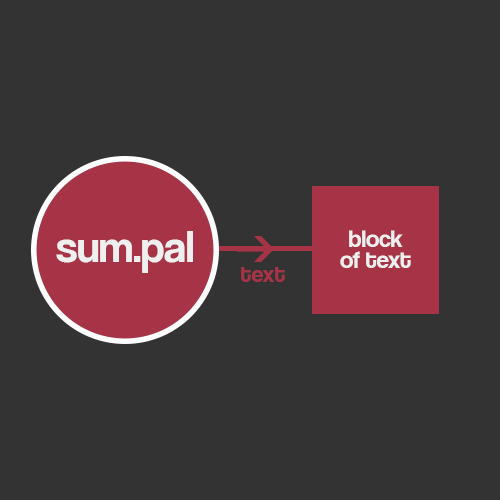
<style>
.page{position:relative;width:500px;height:500px;background:#333333}
.page>*{position:absolute;margin:0}
.t1{font:45.1px "CoolveticaRg-Regular";color:#efefef}
.t2{font:24.5px/20.9px "CoolveticaRg-Regular";color:#efefef}
.t3{font:24.4px "CoolveticaRg-Regular";color:#a63446}
</style>
<div class="page">
<p class="t1" style="left:56px;top:231px;width:137px;height:42px">sum.pal</p>
<p class="t2" style="left:340px;top:230px;width:71px;height:38px;text-align:center">block<br>of text</p>
<p class="t3" style="left:241px;top:267px;width:44px;height:15px">text</p>
</div>
